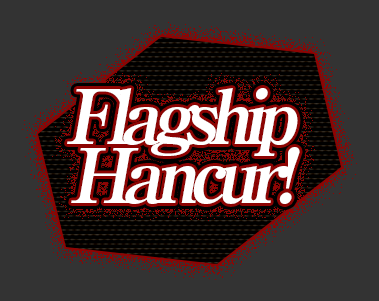
<style>
.page{position:relative;width:379px;height:301px;background:#333333}
.page>*{position:absolute;margin:0}
.t1{font:76px/59px "RyuminPro-ExBold";letter-spacing:-0.12em;color:#ffffff;font-style:italic}
</style>
<div class="page">
<p class="t1" style="left:67px;top:88px;width:233px;height:116px;text-align:center">Flagship<br>Hancur!</p>
</div>
